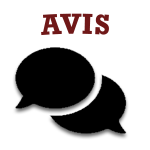
<style>
.page{position:relative;width:150px;height:150px;background:#ffffff}
.page>*{position:absolute;margin:0}
.t1{font:29.2px "Rockwell-Bold";color:#701818}
</style>
<div class="page">
<p class="t1" style="left:41px;top:13px;width:68px;height:23px">AVIS</p>
</div>
